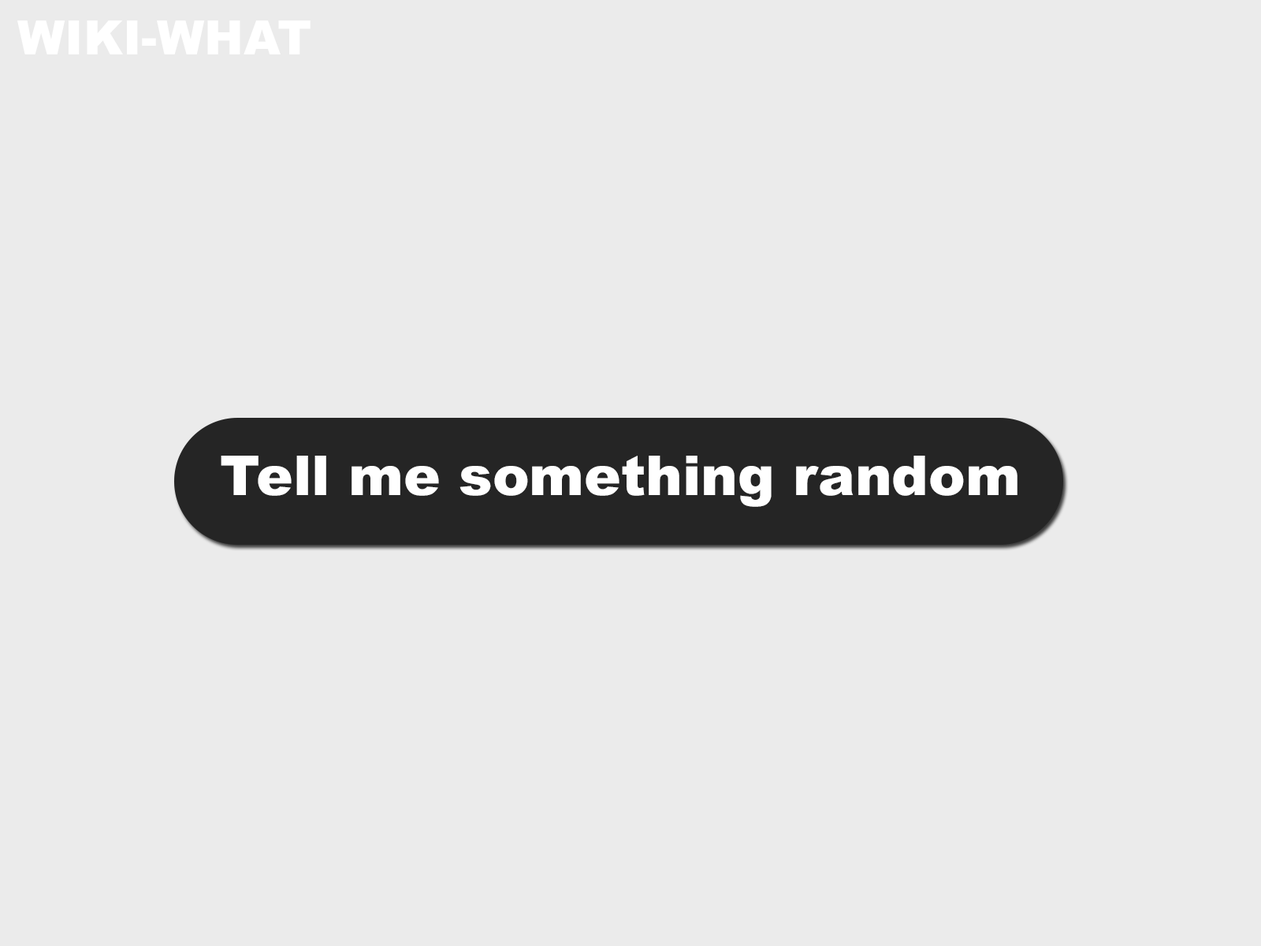
<style>
.page{position:relative;width:1261px;height:946px;background:#ebebeb}
.page>*{position:absolute;margin:0}
.t1{font:47.3px "Arial-Black";color:#ffffff}
.t2{font:55.2px "Arial-Black";color:#ffffff}
</style>
<div class="page">
<p class="t1" style="left:17px;top:20px;width:294px;height:34px">WIKI-WHAT</p>
<p class="t2" style="left:221px;top:456px;width:796px;height:51px">Tell me something random</p>
</div>
